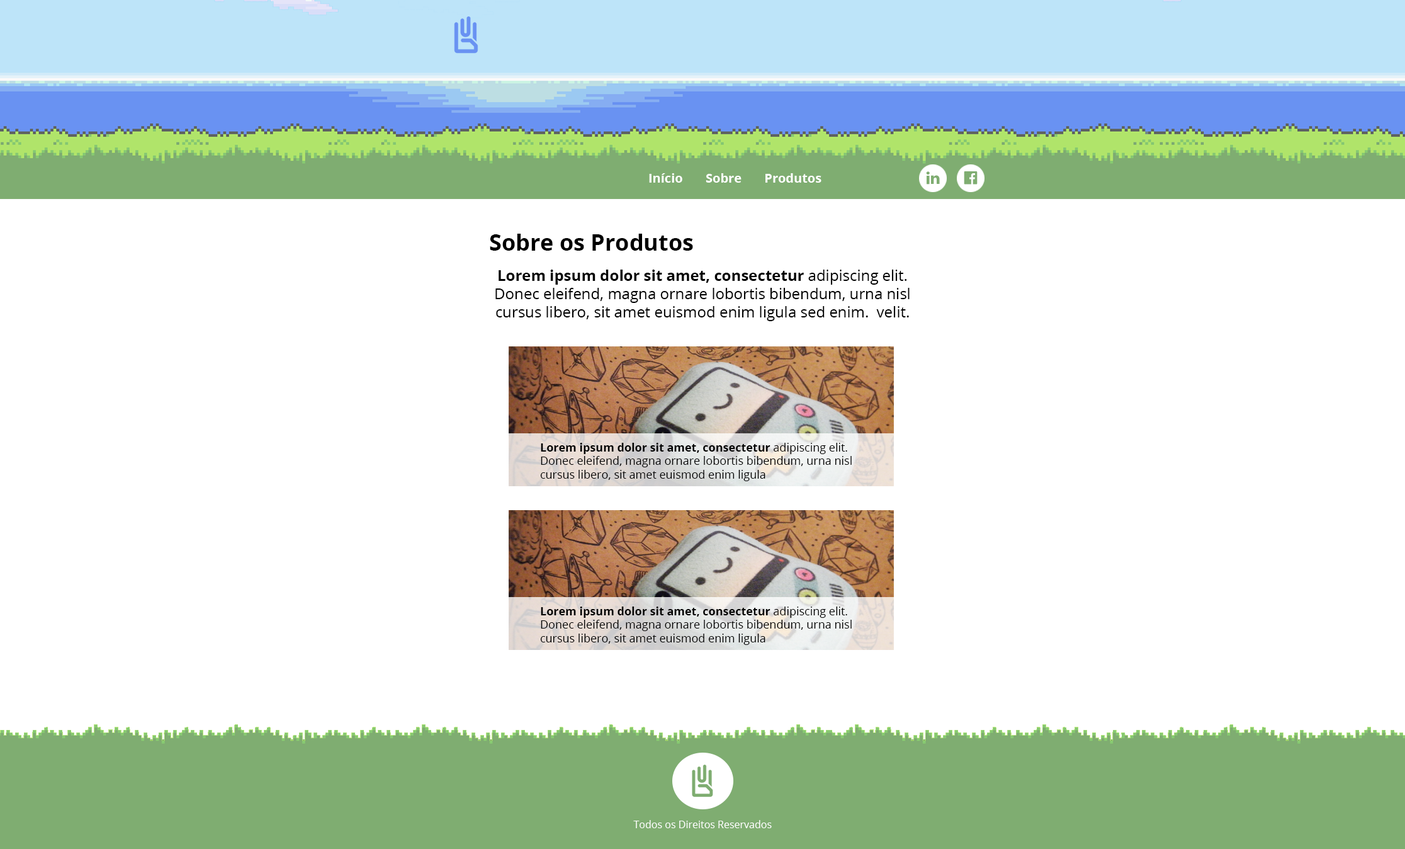
<style>
.page{position:relative;width:1405px;height:849px;background:#ffffff}
.page>*{position:absolute;margin:0}
.t1{font:12.6px "OpenSans-Bold";color:#ffffff}
.t2{font:22.7px "OpenSans-Bold";color:#000000}
.t3{font:15.1px "OpenSans";color:#000000}
.t4{font:15.1px "OpenSans-Bold";color:#000000}
.t5{font:11.3px "OpenSans";color:#000000}
.t6{font:11.3px "OpenSans-Bold";color:#000000}
.t7{font:10.1px "OpenSans";color:#ffffff}
</style>
<div class="page">
<p class="t1" style="left:649px;top:173px;width:173px;height:10px">Início       Sobre       Produtos</p>
<p class="t2" style="left:490px;top:234px;width:203px;height:17px">Sobre os Produtos</p>
<p class="t3" style="left:495px;top:269px;width:415px;height:52px;text-align:center"><span class="t4">Lorem ipsum dolor sit amet, consectetur </span>adipiscing elit. Donec eleifend, magna ornare lobortis bibendum, urna nisl cursus libero, sit amet euismod enim ligula sed enim.  velit.</p>
<p class="t5" style="left:540px;top:443px;width:312px;height:38px"><span class="t6">Lorem ipsum dolor sit amet, consectetur </span>adipiscing elit. Donec eleifend, magna ornare lobortis bibendum, urna nisl cursus libero, sit amet euismod enim ligula</p>
<p class="t5" style="left:540px;top:606px;width:312px;height:39px"><span class="t6">Lorem ipsum dolor sit amet, consectetur </span>adipiscing elit. Donec eleifend, magna ornare lobortis bibendum, urna nisl cursus libero, sit amet euismod enim ligula</p>
<p class="t7" style="left:633px;top:820px;width:139px;height:8px">Todos os Direitos Reservados</p>
</div>
